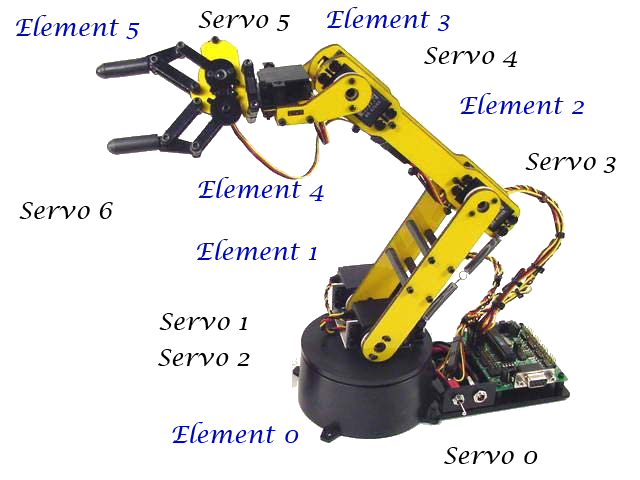
<style>
.page{position:relative;width:640px;height:480px;background:#ffffff}
.page>*{position:absolute;margin:0}
.t1{font:24px "LucidaCalligraphy-Italic";color:#010aaf}
.t2{font:24px "LucidaCalligraphy-Italic";color:#000000}
</style>
<div class="page">
<p class="t1" style="left:16px;top:15px;width:124px;height:24px">Element 5</p>
<p class="t2" style="left:198px;top:11px;width:92px;height:20px">Servo 5</p>
<p class="t1" style="left:327px;top:7px;width:123px;height:24px">Element 3</p>
<p class="t2" style="left:424px;top:47px;width:94px;height:20px">Servo 4</p>
<p class="t1" style="left:460px;top:93px;width:124px;height:21px">Element 2</p>
<p class="t2" style="left:525px;top:153px;width:91px;height:20px">Servo 3</p>
<p class="t1" style="left:198px;top:177px;width:126px;height:24px">Element 4</p>
<p class="t2" style="left:19px;top:202px;width:94px;height:17px">Servo 6</p>
<p class="t1" style="left:197px;top:239px;width:120px;height:21px">Element 1</p>
<p class="t2" style="left:159px;top:313px;width:88px;height:17px">Servo 1</p>
<p class="t2" style="left:158px;top:349px;width:92px;height:17px">Servo 2</p>
<p class="t1" style="left:172px;top:422px;width:127px;height:21px">Element 0</p>
<p class="t2" style="left:444px;top:447px;width:94px;height:17px">Servo 0</p>
</div>
